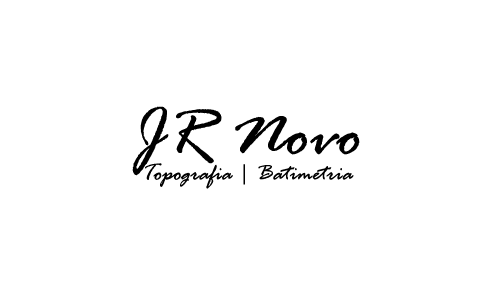
<style>
.page{position:relative;width:500px;height:300px;background:#ffffff}
.page>*{position:absolute;margin:0}
.t1{font:72px "RageItalic";color:#000000}
.t2{font:24px "RageItalic";color:#000000}
</style>
<div class="page">
<p class="t1" style="left:132px;top:106px;width:228px;height:70px">JR Novo</p>
<p class="t2" style="left:145px;top:163px;width:209px;height:26px">Topografia | Batimetria</p>
</div>
